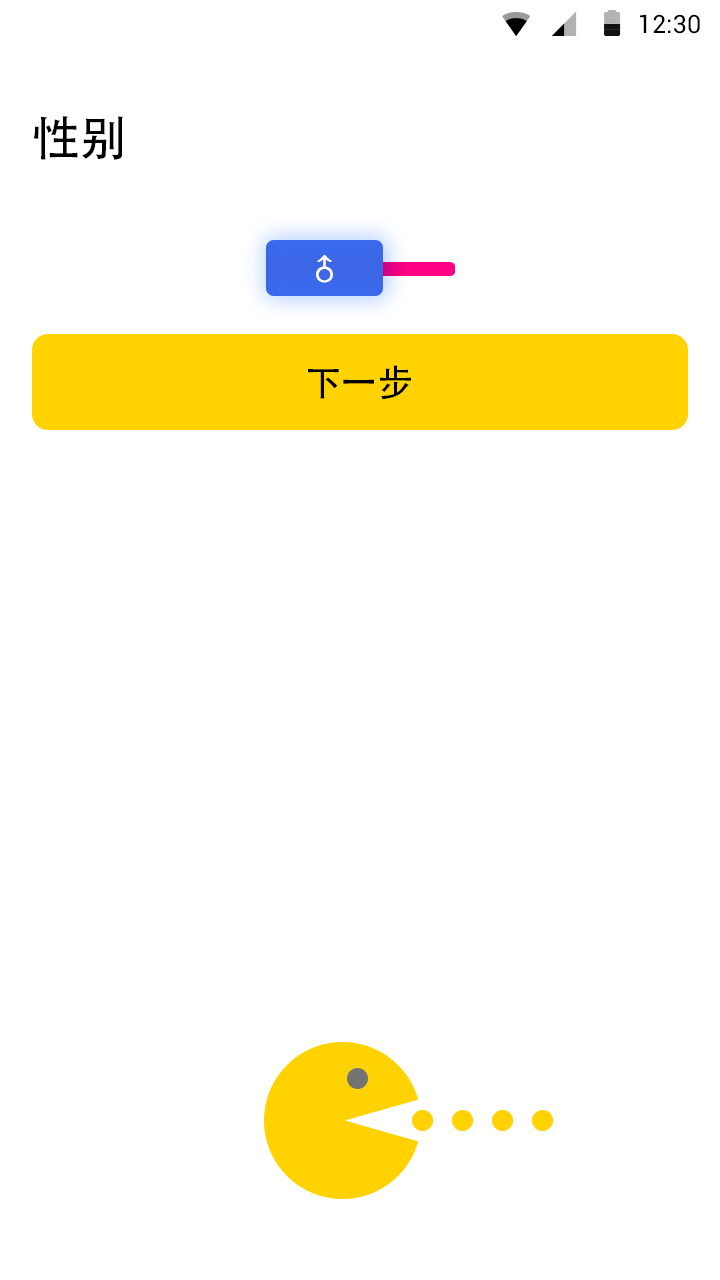
<style>
.page{position:relative;width:720px;height:1280px;background:#ffffff}
.page>*{position:absolute;margin:0}
.t1{font:25.4px "Roboto-Regular";color:#000000}
.t2{font:48px "AdobeHeitiStd-Regular";letter-spacing:-0.004em;color:#000000}
.t3{font:36px "DengXian-Regular";color:#ffffff;font-weight:bold}
.t4{font:36px "AdobeHeitiStd-Regular";letter-spacing:-0.004em;color:#000000}
</style>
<div class="page">
<p class="t1" style="left:640px;top:14px;width:60px;height:20px">12:30</p>
<p class="t2" style="left:33px;top:116px;width:90px;height:44px">性别</p>
<p class="t3" style="left:316px;top:255px;width:17px;height:28px">♂</p>
<p class="t4" style="left:308px;top:365px;width:103px;height:35px">下一步</p>
</div>
